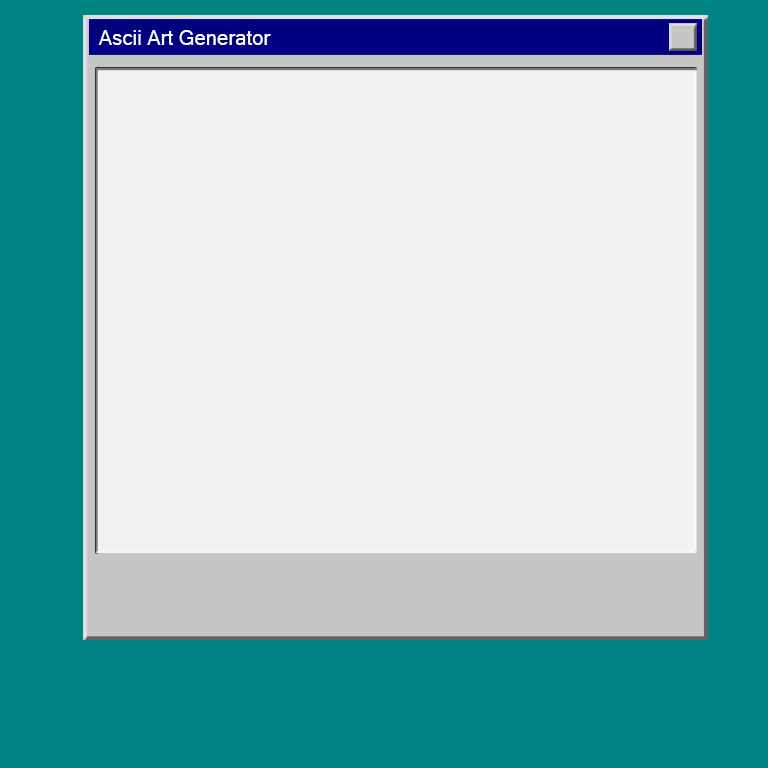
<style>
.page{position:relative;width:768px;height:768px;background:#f2f2f2}
.page>*{position:absolute;margin:0}
.t1{font:20.3px "MicrosoftSansSerif";color:#ffffff}
</style>
<div class="page">
<p class="t1" style="left:98px;top:30px;width:173px;height:15px">Ascii Art Generator</p>
</div>
